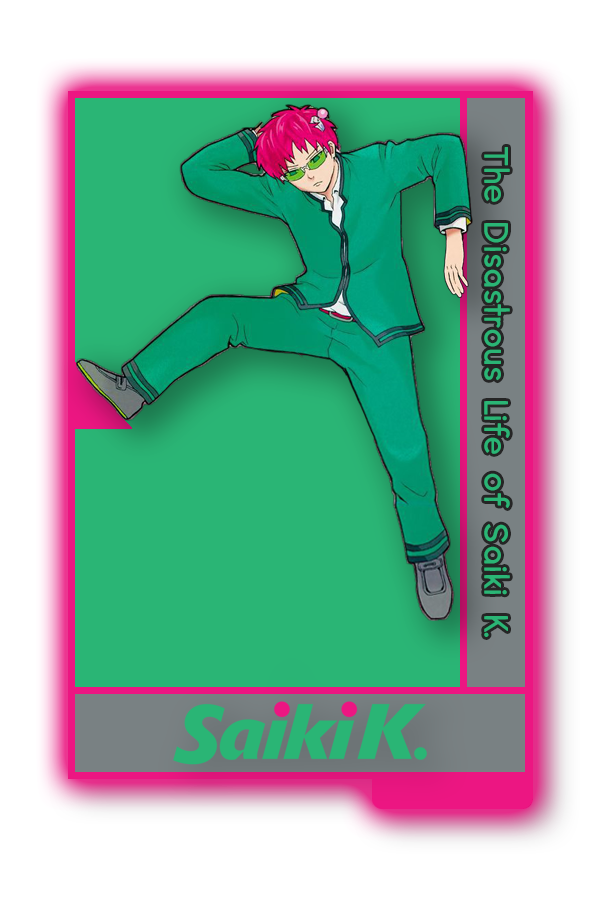
<style>
.page{position:relative;width:600px;height:900px;background:#2ab575}
.page>*{position:absolute;margin:0}
.t1{font:34px "cream-DEMO";color:#2ab575}
</style>
<div class="page">
<p class="t1" style="left:484px;top:147px;width:26px;height:490px;rotate:90deg">The Disastrous Life of Saiki K.</p>
</div>
